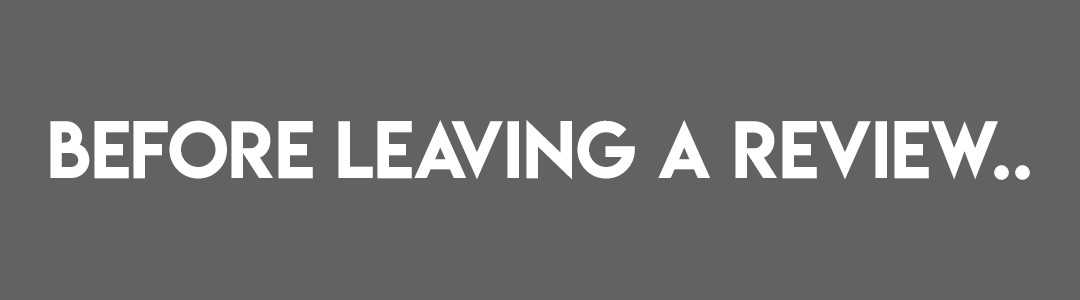
<style>
.page{position:relative;width:1080px;height:300px;background:#626262}
.page>*{position:absolute;margin:0}
.t1{font:72px "LemonMilk";color:#ffffff}
</style>
<div class="page">
<p class="t1" style="left:50px;top:120px;width:980px;height:60px">before leaving a review..</p>
</div>
